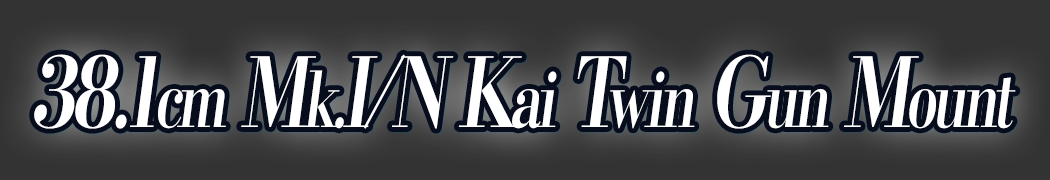
<style>
.page{position:relative;width:1050px;height:180px;background:#333333}
.page>*{position:absolute;margin:0}
.t1{font:96px "KochoStd-Heavy";letter-spacing:-0.08em;color:#ffffff;font-style:italic;scale:0.75 1}
.t2{font:76.8px "KochoStd-Heavy";letter-spacing:-0.08em;color:#ffffff;font-style:italic;scale:0.75 1}
</style>
<div class="page">
<p class="t1" style="left:34px;top:54px;width:982px;height:75px">38.1<span class="t2">cm</span> M<span class="t2">k.</span>I/N K<span class="t2">ai</span> T<span class="t2">win</span> G<span class="t2">un</span> M<span class="t2">ount</span></p>
</div>
